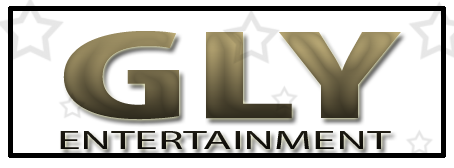
<style>
.page{position:relative;width:454px;height:168px;background:#ffffff}
.page>*{position:absolute;margin:0}
.t1{font:25.5px "MyriadPro-Regular";scale:1.85 1}
.t2{font:127.4px "MyriadPro-BoldCond";scale:2.22 1}
</style>
<div class="page">
<p class="t1" style="left:60px;top:31px;width:341px;height:118px"><span class="t2">GLY<br></span>ENTERTAINMENT</p>
</div>
